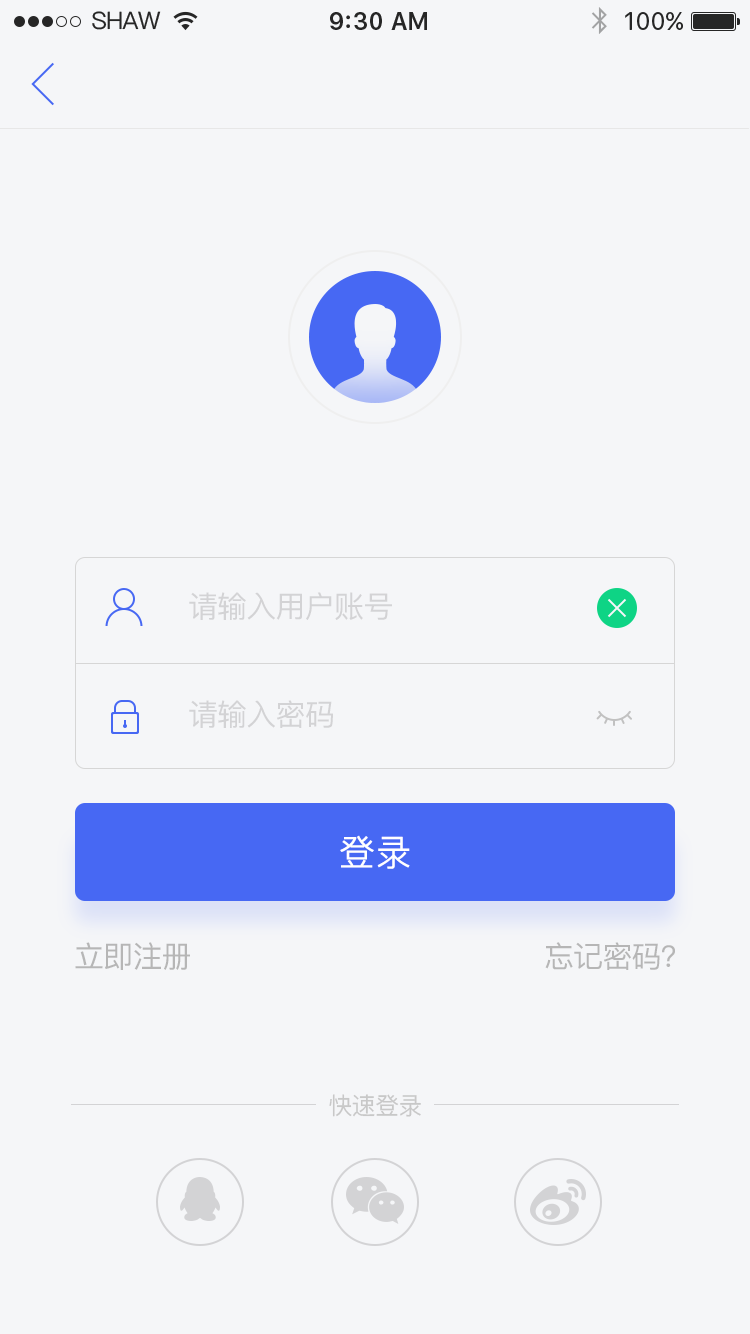
<style>
.page{position:relative;width:750px;height:1334px;background:#f5f6f8}
.page>*{position:absolute;margin:0}
.t1{font:24px "PingFangSC-Medium";letter-spacing:-0.025em;color:#262626}
.t2{font:24px "SFUIText-Semibold";color:#262626}
.t3{font:24px "SFUIText-Regular";color:#262626}
.t4{font:30px "PingFangSC-Medium";letter-spacing:-0.025em;color:#d3d3d5}
.t5{font:36px "PingFangSC-Regular";color:#ffffff;text-transform:uppercase;font-weight:bold}
.t6{font:30px "PingFangSC-Medium";letter-spacing:-0.025em;color:#b6b6b6}
.t7{font:24px "PingFangSC-Medium";letter-spacing:-0.025em;color:#c8c8c8}
</style>
<div class="page">
<p class="t1" style="left:92px;top:11px;width:69px;height:19px">SHAW</p>
<p class="t2" style="left:330px;top:12px;width:97px;height:18px">9:30 AM</p>
<p class="t3" style="left:625px;top:12px;width:58px;height:18px">100%</p>
<p class="t4" style="left:189px;top:592px;width:203px;height:28px">请输入用户账号</p>
<p class="t4" style="left:189px;top:700px;width:144px;height:28px">请输入密码</p>
<p class="t5" style="left:340px;top:835px;width:70px;height:34px">登录</p>
<p class="t6" style="left:75px;top:942px;width:115px;height:28px">立即注册</p>
<p class="t6" style="left:545px;top:942px;width:130px;height:28px">忘记密码？</p>
<p class="t7" style="left:329px;top:1094px;width:92px;height:23px">快速登录</p>
</div>
